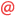
<style>
.page{position:relative;width:16px;height:16px;background:#ffffff}
.page>*{position:absolute;margin:0}
.t1{font:20px "MyriadPro-Regular";color:#ee4444}
</style>
<div class="page">
<p class="t1" style="left:1px;top:1px;width:14px;height:15px">@</p>
</div>
